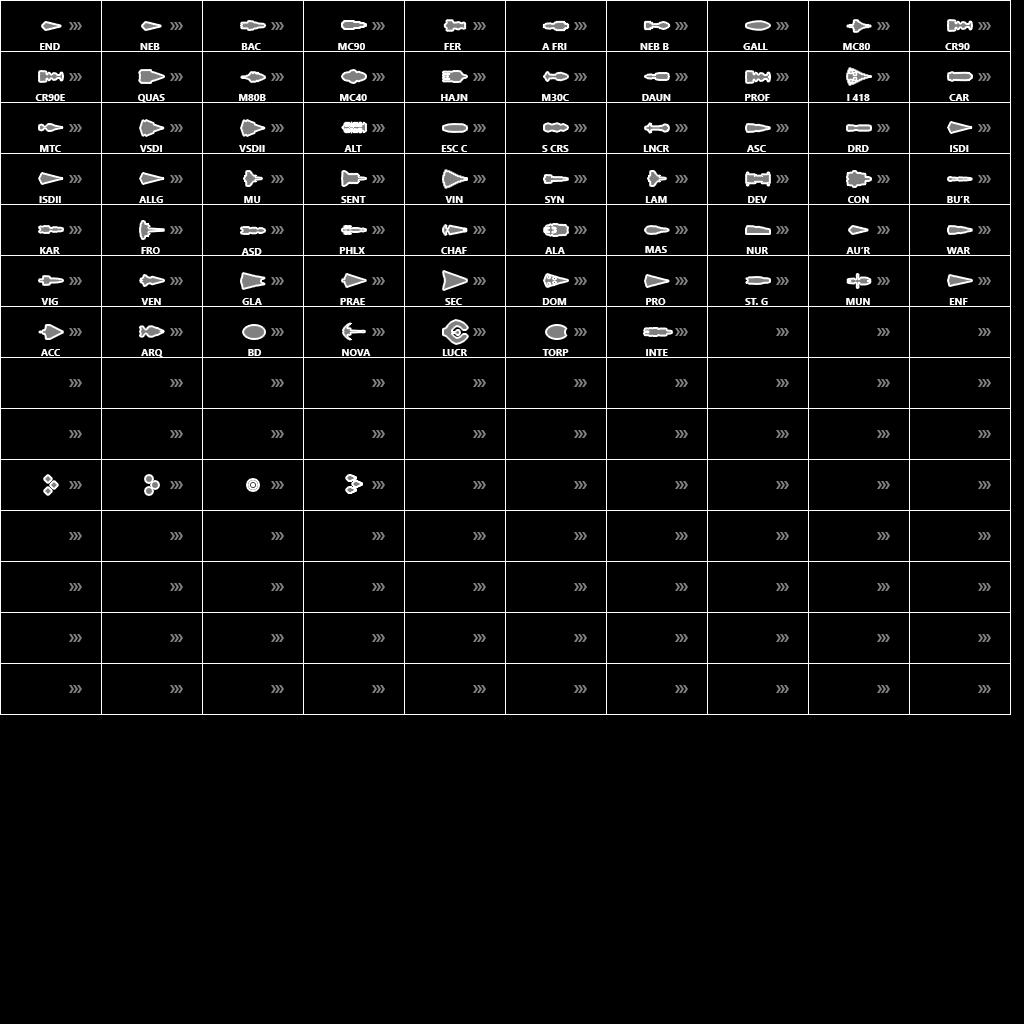
<style>
.page{position:relative;width:1024px;height:1024px;background:#000000}
.page>*{position:absolute;margin:0}
.t1{font:10px "LeelawadeeUI-Bold";color:#ffffff}
</style>
<div class="page">
<p class="t1" style="left:40px;top:43px;width:20px;height:7px">END</p>
<p class="t1" style="left:140px;top:43px;width:20px;height:7px">NEB</p>
<p class="t1" style="left:241px;top:43px;width:20px;height:7px">BAC</p>
<p class="t1" style="left:338px;top:43px;width:27px;height:7px">MC90</p>
<p class="t1" style="left:444px;top:43px;width:17px;height:7px">FER</p>
<p class="t1" style="left:542px;top:43px;width:25px;height:7px">A FRI</p>
<p class="t1" style="left:640px;top:43px;width:29px;height:7px">NEB B</p>
<p class="t1" style="left:743px;top:43px;width:25px;height:7px">GALL</p>
<p class="t1" style="left:843px;top:43px;width:27px;height:7px">MC80</p>
<p class="t1" style="left:945px;top:43px;width:25px;height:7px">CR90</p>
<p class="t1" style="left:35px;top:94px;width:30px;height:7px">CR90E</p>
<p class="t1" style="left:138px;top:94px;width:27px;height:8px">QUAS</p>
<p class="t1" style="left:239px;top:94px;width:27px;height:7px">M80B</p>
<p class="t1" style="left:340px;top:94px;width:27px;height:7px">MC40</p>
<p class="t1" style="left:441px;top:94px;width:27px;height:7px">HAJN</p>
<p class="t1" style="left:542px;top:94px;width:27px;height:7px">M30C</p>
<p class="t1" style="left:642px;top:94px;width:29px;height:7px">DAUN</p>
<p class="t1" style="left:745px;top:94px;width:25px;height:7px">PROF</p>
<p class="t1" style="left:847px;top:94px;width:23px;height:7px">I 418</p>
<p class="t1" style="left:949px;top:94px;width:20px;height:7px">CAR</p>
<p class="t1" style="left:40px;top:145px;width:21px;height:7px">MTC</p>
<p class="t1" style="left:140px;top:145px;width:22px;height:7px">VSDI</p>
<p class="t1" style="left:239px;top:145px;width:26px;height:7px">VSDII</p>
<p class="t1" style="left:344px;top:145px;width:18px;height:7px">ALT</p>
<p class="t1" style="left:441px;top:145px;width:26px;height:7px">ESC C</p>
<p class="t1" style="left:542px;top:145px;width:27px;height:7px">S CRS</p>
<p class="t1" style="left:643px;top:145px;width:26px;height:7px">LNCR</p>
<p class="t1" style="left:747px;top:145px;width:19px;height:7px">ASC</p>
<p class="t1" style="left:848px;top:145px;width:21px;height:7px">DRD</p>
<p class="t1" style="left:950px;top:145px;width:19px;height:7px">ISDI</p>
<p class="t1" style="left:39px;top:196px;width:22px;height:7px">ISDII</p>
<p class="t1" style="left:139px;top:196px;width:24px;height:7px">ALLG</p>
<p class="t1" style="left:244px;top:196px;width:17px;height:7px">MU</p>
<p class="t1" style="left:341px;top:196px;width:25px;height:7px">SENT</p>
<p class="t1" style="left:445px;top:196px;width:18px;height:7px">VIN</p>
<p class="t1" style="left:545px;top:196px;width:19px;height:7px">SYN</p>
<p class="t1" style="left:645px;top:196px;width:22px;height:7px">LAM</p>
<p class="t1" style="left:748px;top:196px;width:19px;height:7px">DEV</p>
<p class="t1" style="left:848px;top:196px;width:21px;height:7px">CON</p>
<p class="t1" style="left:947px;top:196px;width:23px;height:7px">BU’R</p>
<p class="t1" style="left:645px;top:246px;width:22px;height:7px">MAS</p>
<p class="t1" style="left:40px;top:247px;width:20px;height:7px">KAR</p>
<p class="t1" style="left:141px;top:247px;width:19px;height:7px">FRO</p>
<p class="t1" style="left:241px;top:248px;width:21px;height:7px">ASD</p>
<p class="t1" style="left:339px;top:247px;width:26px;height:7px">PHLX</p>
<p class="t1" style="left:441px;top:247px;width:26px;height:7px">CHAF</p>
<p class="t1" style="left:545px;top:247px;width:20px;height:7px">ALA</p>
<p class="t1" style="left:746px;top:247px;width:22px;height:7px">NUR</p>
<p class="t1" style="left:846px;top:247px;width:24px;height:7px">AU’R</p>
<p class="t1" style="left:946px;top:247px;width:24px;height:7px">WAR</p>
<p class="t1" style="left:41px;top:298px;width:17px;height:7px">VIG</p>
<p class="t1" style="left:141px;top:298px;width:20px;height:7px">VEN</p>
<p class="t1" style="left:242px;top:298px;width:20px;height:7px">GLA</p>
<p class="t1" style="left:340px;top:298px;width:25px;height:7px">PRAE</p>
<p class="t1" style="left:445px;top:298px;width:17px;height:7px">SEC</p>
<p class="t1" style="left:542px;top:298px;width:25px;height:7px">DOM</p>
<p class="t1" style="left:646px;top:298px;width:20px;height:7px">PRO</p>
<p class="t1" style="left:745px;top:298px;width:23px;height:7px">ST. G</p>
<p class="t1" style="left:846px;top:298px;width:24px;height:7px">MUN</p>
<p class="t1" style="left:949px;top:298px;width:19px;height:7px">ENF</p>
<p class="t1" style="left:41px;top:349px;width:19px;height:7px">ACC</p>
<p class="t1" style="left:141px;top:349px;width:22px;height:8px">ARQ</p>
<p class="t1" style="left:248px;top:349px;width:14px;height:7px">BD</p>
<p class="t1" style="left:342px;top:349px;width:29px;height:7px">NOVA</p>
<p class="t1" style="left:442px;top:349px;width:25px;height:7px">LUCR</p>
<p class="t1" style="left:542px;top:349px;width:27px;height:7px">TORP</p>
<p class="t1" style="left:646px;top:349px;width:22px;height:7px">INTE</p>
</div>
